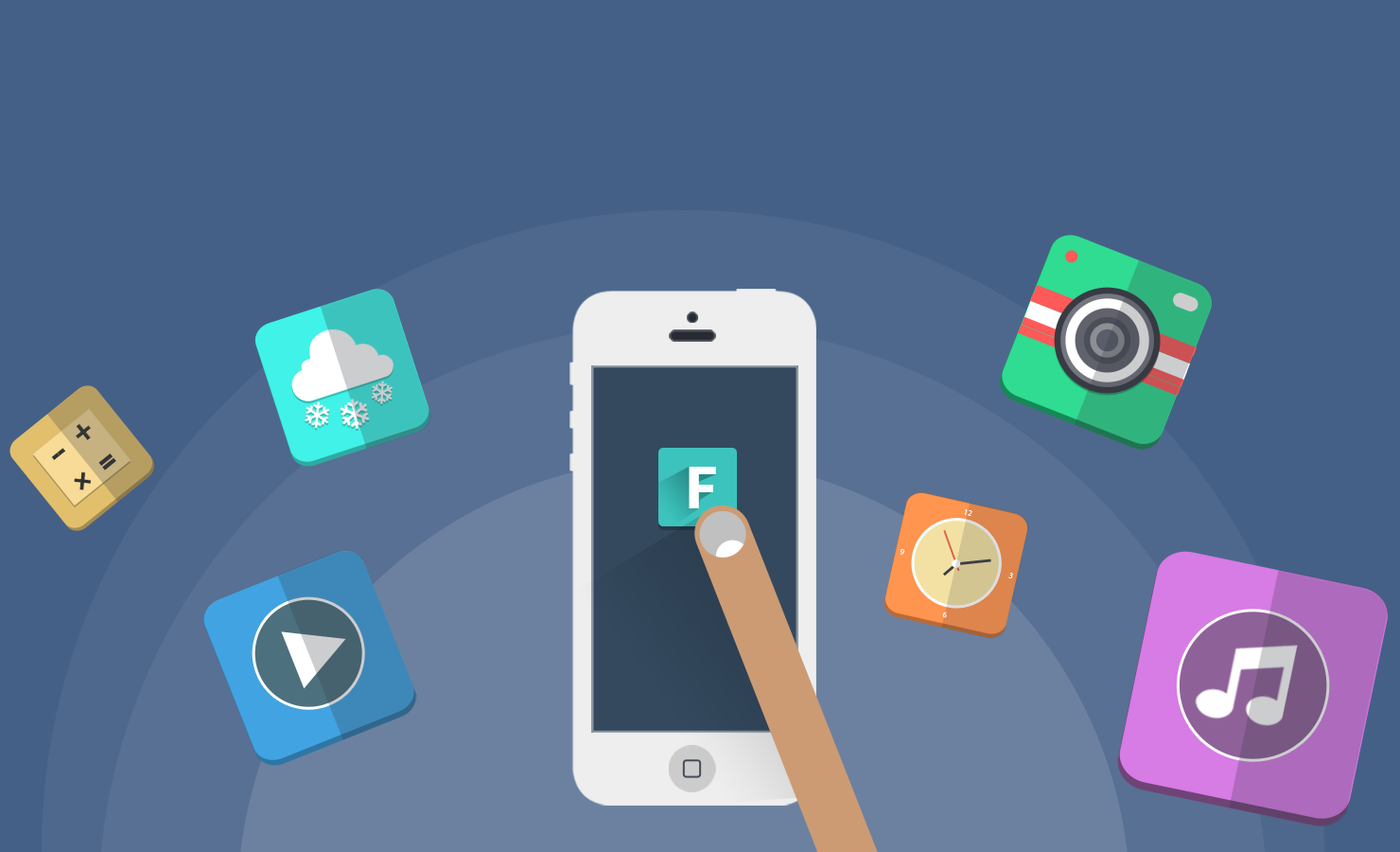
<style>
.page{position:relative;width:1400px;height:852px;background:#456087}
.page>*{position:absolute;margin:0}
.t1{font:36.9px "ProximaNova-Extrabld";color:#323232}
.t2{font:30.8px "ProximaNova-Extrabld";color:#323232}
.t3{font:56.8px "Lato-Black";color:#ffffff}
.t4{font:8.1px "MyriadPro-Regular";color:#ffffff}
</style>
<div class="page">
<p class="t1" style="left:76px;top:423px;width:15px;height:17px;rotate:-39deg">+</p>
<p class="t2" style="left:57px;top:447px;width:8px;height:9px;rotate:-39deg">-</p>
<p class="t2" style="left:51px;top:451px;width:9px;height:10px;rotate:-39deg">-</p>
<p class="t1" style="left:74px;top:471px;width:18px;height:20px;rotate:6deg">+</p>
<p class="t3" style="left:689px;top:466px;width:27px;height:42px">F</p>
<p class="t4" style="left:964px;top:508px;width:9px;height:8px;rotate:13deg">12</p>
<p class="t4" style="left:900px;top:548px;width:5px;height:6px;rotate:13deg">9</p>
<p class="t4" style="left:1009px;top:571px;width:4px;height:7px;rotate:13deg">3</p>
<p class="t4" style="left:942px;top:611px;width:5px;height:7px;rotate:13deg">6</p>
</div>
